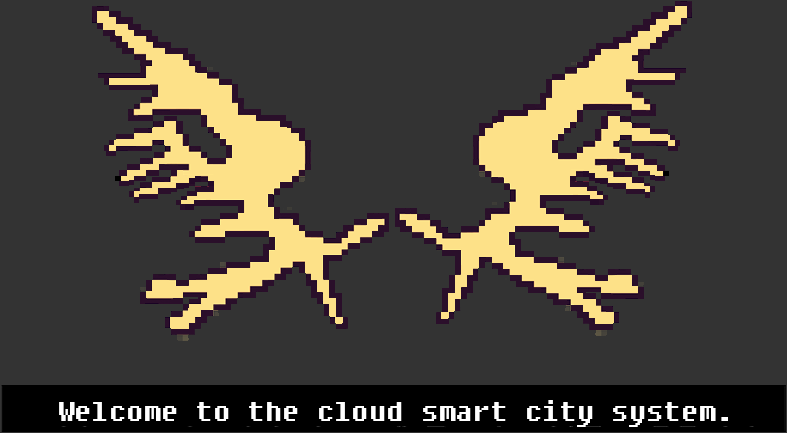
<style>
.page{position:relative;width:787px;height:433px;background:#333333}
.page>*{position:absolute;margin:0}
.t1{font:34.7px "DungGeunMo";color:#ffffff}
</style>
<div class="page">
<p class="t1" style="left:59px;top:400px;width:669px;height:27px">Welcome to the cloud smart city system.</p>
</div>
